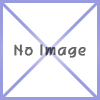
<style>
.page{position:relative;width:100px;height:100px;background:#ffffff}
.page>*{position:absolute;margin:0}
.t1{font:14px "H2porM";color:#666666;font-weight:bold}
</style>
<div class="page">
<p class="t1" style="left:14px;top:44px;width:72px;height:14px">No Image</p>
</div>
